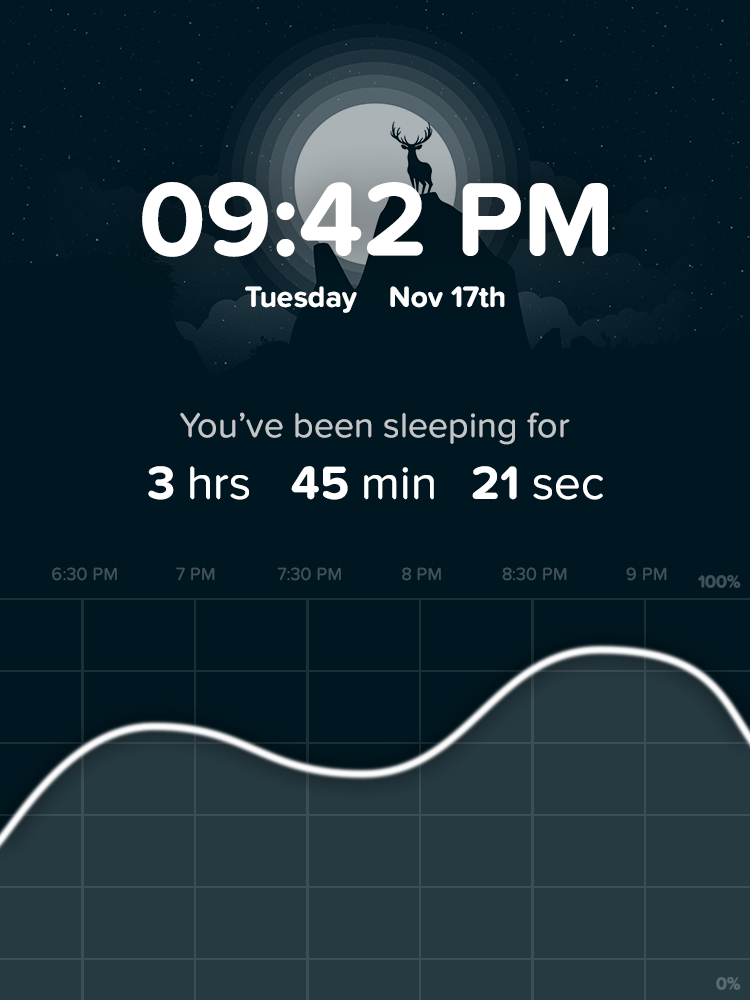
<style>
.page{position:relative;width:750px;height:1000px;background:#001721}
.page>*{position:absolute;margin:0}
.t1{font:108px "ProximaNovaSoft-Bold";color:#ffffff}
.t2{font:30px "ProximaNovaSoft-Bold";color:#ffffff}
.t3{font:36px "ProximaNovaSoft-Regular";color:#c3c5c7}
.t4{font:48px "ProximaNovaSoft-Regular";color:#ffffff}
.t5{font:48px "ProximaNovaSoft-Bold";color:#ffffff}
.t6{font:18px "ProximaNovaSoft-Regular";color:#405159}
.t7{font:18px "ProximaNovaSoft-Bold";color:#405159}
.t8{font:18px "ProximaNovaSoft-Bold";color:#5c6b72}
</style>
<div class="page">
<p class="t1" style="left:142px;top:182px;width:466px;height:75px">09:42 PM</p>
<p class="t2" style="left:245px;top:286px;width:260px;height:27px">Tuesday Nov 17th</p>
<p class="t3" style="left:180px;top:412px;width:390px;height:33px">You’ve been sleeping for</p>
<p class="t4" style="left:148px;top:466px;width:455px;height:34px"><span class="t5">3</span> hrs  <span class="t5">45</span> min <span class="t5">21</span> sec</p>
<p class="t6" style="left:52px;top:567px;width:65px;height:14px">6:30 PM</p>
<p class="t6" style="left:176px;top:567px;width:39px;height:14px">7 PM</p>
<p class="t6" style="left:277px;top:567px;width:64px;height:14px">7:30 PM</p>
<p class="t6" style="left:402px;top:567px;width:39px;height:14px">8 PM</p>
<p class="t6" style="left:502px;top:567px;width:65px;height:14px">8:30 PM</p>
<p class="t6" style="left:626px;top:567px;width:41px;height:14px">9 PM</p>
<p class="t7" style="left:698px;top:575px;width:43px;height:13px">100%</p>
<p class="t8" style="left:716px;top:977px;width:25px;height:13px">0%</p>
</div>
